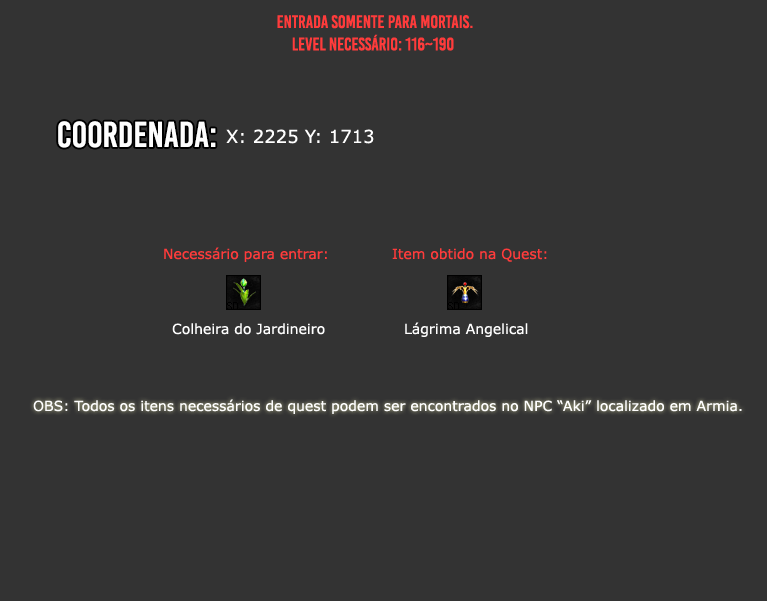
<style>
.page{position:relative;width:767px;height:601px;background:#333333}
.page>*{position:absolute;margin:0}
.t1{font:18px "BebasKai";color:#ff3b3b}
.t2{font:36px "BebasKai";color:#fefefe}
.t3{font:18px "Verdana";color:#fefefe}
.t4{font:14px "Verdana";color:#ff3b3b}
.t5{font:14px "Verdana";color:#fefefe}
</style>
<div class="page">
<p class="t1" style="left:277px;top:15px;width:196px;height:14px">Entrada somente para mortais.</p>
<p class="t1" style="left:292px;top:34px;width:162px;height:17px">level necessário: 116~190</p>
<p class="t2" style="left:58px;top:121px;width:158px;height:27px">Coordenada:</p>
<p class="t3" style="left:226px;top:129px;width:148px;height:15px">X: 2225 Y: 1713</p>
<p class="t4" style="left:164px;top:247px;width:163px;height:15px">Necessário para entrar:</p>
<p class="t4" style="left:392px;top:248px;width:155px;height:14px">Item obtido na Quest:</p>
<p class="t5" style="left:172px;top:323px;width:153px;height:12px">Colheira do Jardineiro</p>
<p class="t5" style="left:405px;top:322px;width:123px;height:15px">Lágrima Angelical</p>
<p class="t5" style="left:33px;top:399px;width:709px;height:15px">OBS: Todos os itens necessários de quest podem ser encontrados no NPC “Aki” localizado em Armia.</p>
</div>
